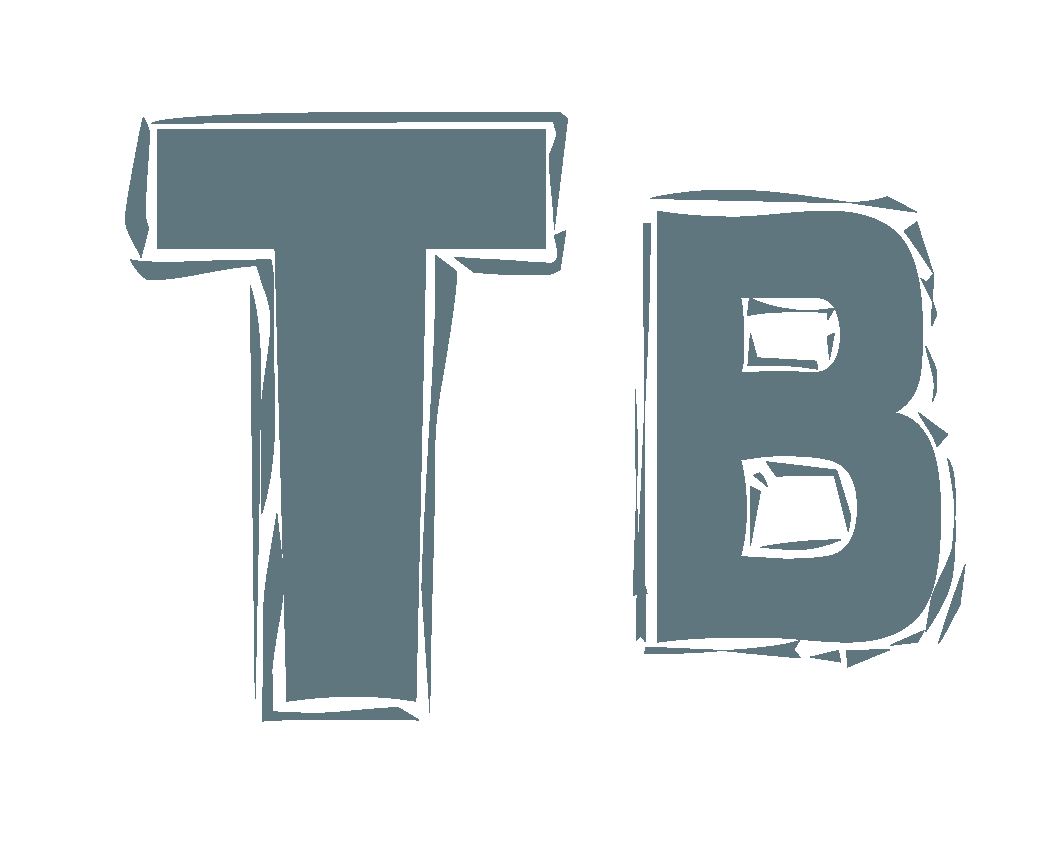
<style>
.page{position:relative;width:1064px;height:866px;background:#ffffff}
.page>*{position:absolute;margin:0}
.t1{font:833.3px "ARDARLING";color:#60767f}
.t2{font:300px "ARDARLING";color:#60767f}
</style>
<div class="page">
<p class="t1" style="left:125px;top:112px;width:841px;height:610px"><span class="t2"><br></span>Tb</p>
</div>
